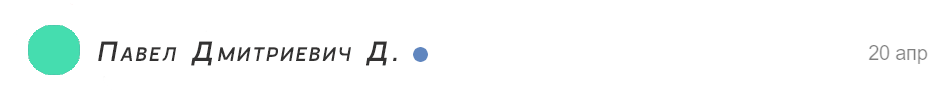
<style>
.page{position:relative;width:944px;height:101px;background:#ffffff}
.page>*{position:absolute;margin:0}
.t1{font:28px "GoshaSans-Regular";letter-spacing:0.12em;color:#333232;font-variant:small-caps;font-style:italic}
</style>
<div class="page">
<p class="t1" style="left:98px;top:41px;width:299px;height:25px">Павел Дмитриевич Д.</p>
</div>
